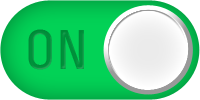
<style>
.page{position:relative;width:200px;height:100px}
.page>*{position:absolute;margin:0}
.t1{font:54px "JetBrainsMono-Medium";color:#00903a}
</style>
<div class="page">
<p class="t1" style="left:28px;top:29px;width:56px;height:41px">ON</p>
</div>
